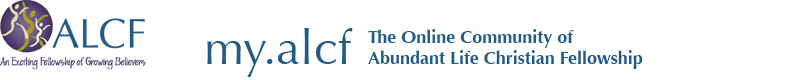
<style>
.page{position:relative;width:789px;height:80px;background:#ffffff}
.page>*{position:absolute;margin:0}
.t1{font:48px "Optima-Regular";color:#225b84}
.t2{font:18px "Optima-Bold";color:#225b84}
</style>
<div class="page">
<p class="t1" style="left:207px;top:28px;width:146px;height:49px">my.alcf</p>
<p class="t2" style="left:368px;top:29px;width:275px;height:40px">The Online Community of<br>Abundant Life Christian Fellowship</p>
</div>
